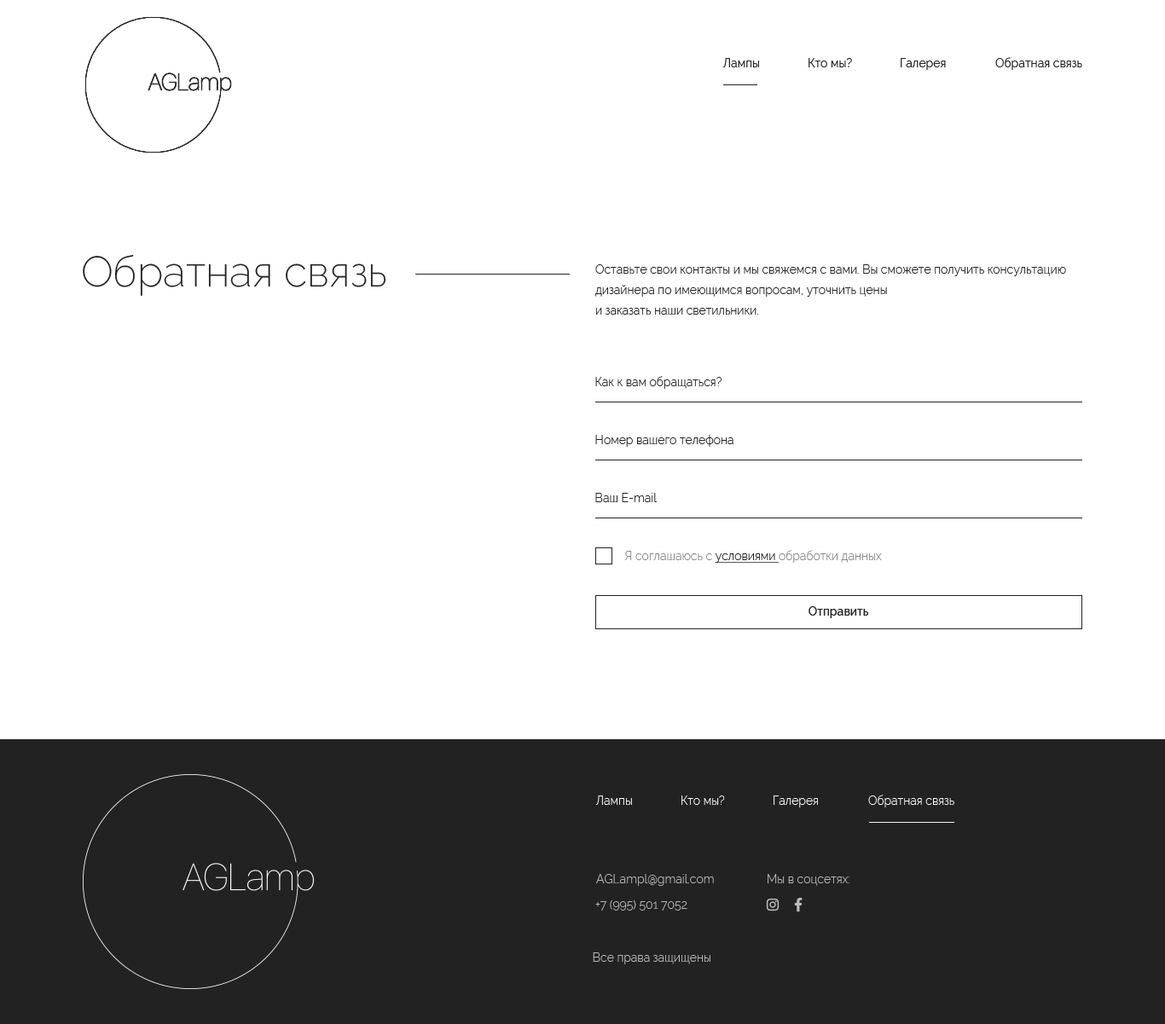
<style>
.page{position:relative;width:1165px;height:1024px;background:#ffffff}
.page>*{position:absolute;margin:0}
.t1{font:11.9px "Raleway-Regular";color:#222222}
.t2{font:42.6px "Raleway-ExtraLight";color:#222222}
.t3{font:11.9px/20.5px "Raleway-Light";color:#222222}
.t4{font:11.9px "Raleway-Light";color:#222222}
.t5{font:11.9px "Raleway-Light";color:#888888}
.t6{font:11.9px "Raleway-Light";color:#222222;text-decoration:underline}
.t7{font:11.9px "Raleway-Medium";color:#222222}
.t8{font:11.9px "Raleway-Light";color:#ffffff}
.t9{font:11.9px "Raleway-Light";color:#bbbbbb}
</style>
<div class="page">
<p class="t1" style="left:723px;top:58px;width:36px;height:9px">Лампы</p>
<p class="t1" style="left:808px;top:58px;width:44px;height:9px">Кто мы?</p>
<p class="t1" style="left:900px;top:58px;width:45px;height:12px">Галерея</p>
<p class="t1" style="left:995px;top:57px;width:87px;height:13px">Обратная связь</p>
<p class="t2" style="left:83px;top:255px;width:303px;height:41px">Обратная связь</p>
<p class="t3" style="left:595px;top:264px;width:471px;height:51px">Оставьте свои контакты и мы свяжемся с вами. Вы сможете получить консультацию дизайнера по имеющимся вопросам, уточнить цены<br>и заказать наши светильники.</p>
<p class="t4" style="left:595px;top:376px;width:126px;height:13px">Как к вам обращаться?</p>
<p class="t4" style="left:595px;top:435px;width:138px;height:12px">Номер вашего телефона</p>
<p class="t4" style="left:595px;top:493px;width:61px;height:9px">Ваш E-mail</p>
<p class="t5" style="left:624px;top:550px;width:258px;height:13px">Я соглашаюсь с <span class="t6">условиями </span>обработки данных</p>
<p class="t7" style="left:808px;top:606px;width:60px;height:12px">Отправить</p>
<p class="t8" style="left:596px;top:795px;width:36px;height:10px">Лампы</p>
<p class="t8" style="left:681px;top:795px;width:44px;height:10px">Кто мы?</p>
<p class="t8" style="left:773px;top:795px;width:45px;height:12px">Галерея</p>
<p class="t8" style="left:868px;top:795px;width:86px;height:12px">Обратная связь</p>
<p class="t9" style="left:596px;top:874px;width:118px;height:12px">AGLampl@gmail.com</p>
<p class="t9" style="left:767px;top:874px;width:83px;height:12px">Мы в соцсетях:</p>
<p class="t9" style="left:595px;top:899px;width:92px;height:12px">+7 (995) 501 7052</p>
<p class="t9" style="left:593px;top:952px;width:117px;height:12px">Все права защищены</p>
</div>
